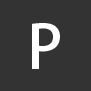
<style>
.page{position:relative;width:91px;height:91px;background:#333333}
.page>*{position:absolute;margin:0}
.t1{font:60px "AdobeHeitiStd-Regular";color:#ffffff}
</style>
<div class="page">
<p class="t1" style="left:32px;top:23px;width:28px;height:46px">P</p>
</div>
